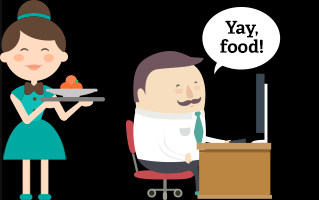
<style>
.page{position:relative;width:319px;height:200px;background:#000000}
.page>*{position:absolute;margin:0}
.t1{font:18px/19px "AdelleBasic-Bold";color:#000000}
</style>
<div class="page">
<p class="t1" style="left:220px;top:20px;width:43px;height:33px;text-align:center">Yay,<br>food!</p>
</div>
